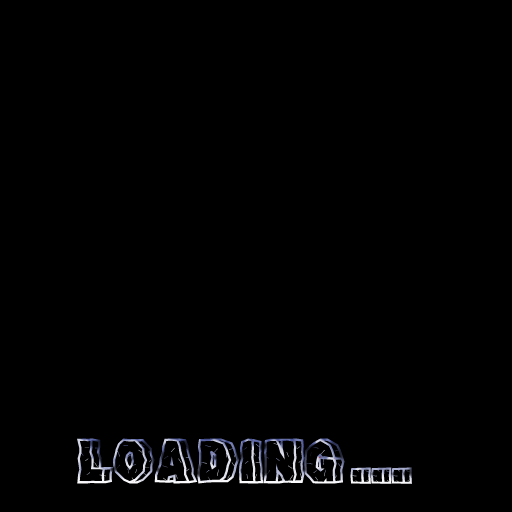
<style>
.page{position:relative;width:512px;height:512px;background:#000000}
.page>*{position:absolute;margin:0}
.t1{font:45px "RockFont"}
</style>
<div class="page">
<p class="t1" style="left:77px;top:438px;width:335px;height:46px">LOADING ...</p>
</div>
